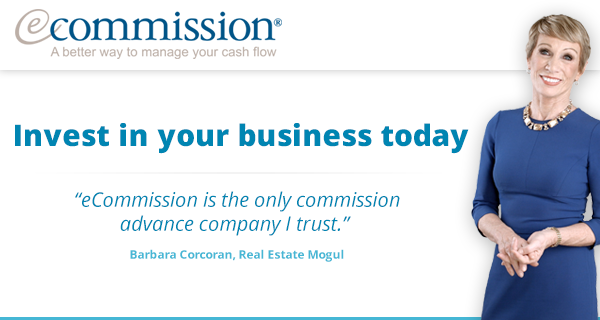
<style>
.page{position:relative;width:600px;height:320px;background:#ffffff}
.page>*{position:absolute;margin:0}
.t1{font:29.7px "OpenSans-Extrabold";color:#0085b2}
.t2{font:20px "OpenSans-Italic";color:#0085b2}
.t3{font:12px "OpenSans-Bold";color:#46b7d5}
</style>
<div class="page">
<p class="t1" style="left:15px;top:123px;width:454px;height:31px">Invest in your business today</p>
<p class="t2" style="left:75px;top:191px;width:325px;height:45px;text-align:center">“eCommission is the only commission<br>advance company I trust.”</p>
<p class="t3" style="left:130px;top:249px;width:214px;height:13px">Barbara Corcoran, Real Estate Mogul</p>
</div>
